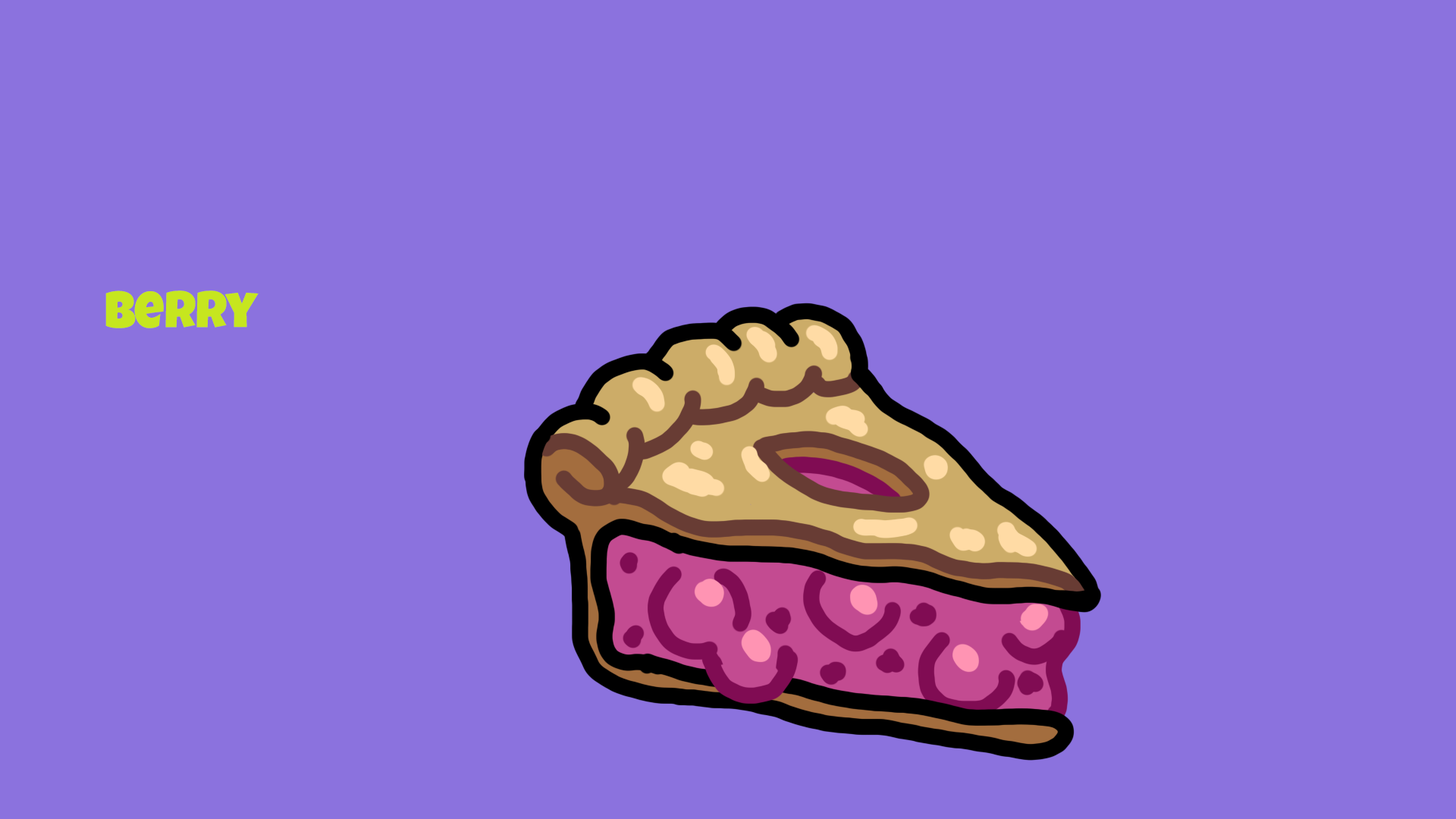
<style>
.page{position:relative;width:1456px;height:819px;background:#8b72de}
.page>*{position:absolute;margin:0}
.t1{font:51.6px "LuckiestGuy-Regular";color:#c6e61f}
</style>
<div class="page">
<p class="t1" style="left:105px;top:290px;width:154px;height:38px">Berry</p>
</div>
